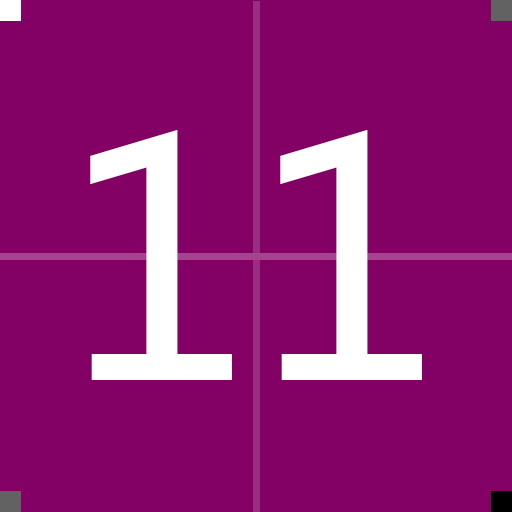
<style>
.page{position:relative;width:512px;height:512px;background:#830065}
.page>*{position:absolute;margin:0}
.t1{font:323.1px "MicrosoftYaHei";color:#ffffff}
</style>
<div class="page">
<p class="t1" style="left:90px;top:130px;width:332px;height:250px">11</p>
</div>
